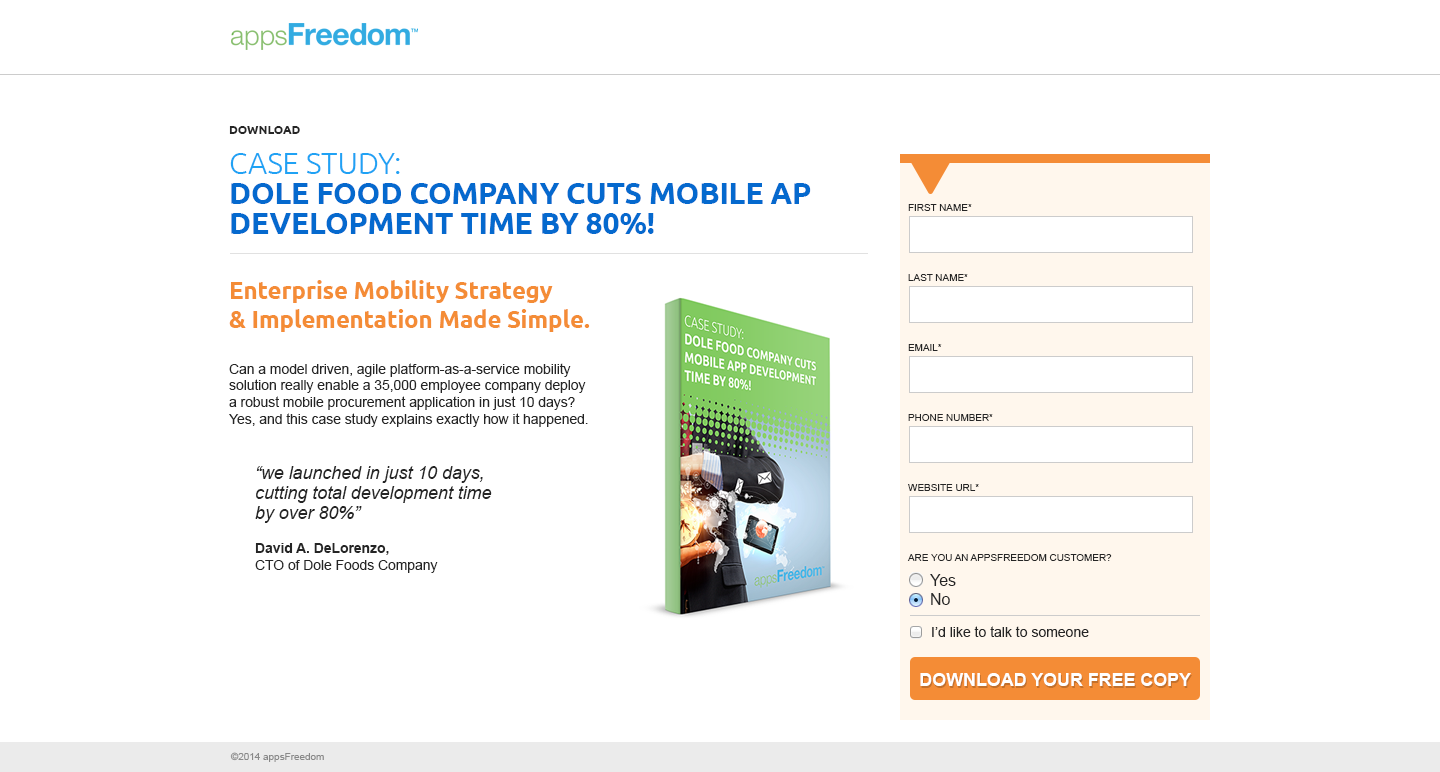
<style>
.page{position:relative;width:1440px;height:772px;background:#ffffff}
.page>*{position:absolute;margin:0}
.t1{font:14px "ArialMT";letter-spacing:-0.005em;color:#252525}
.t2{font:12px/40px "Ubuntu-Bold";letter-spacing:-0.005em;color:#252525;text-transform:uppercase}
.t3{font:30px/40px "Ubuntu-Light";letter-spacing:-0.005em;color:#1fa2f4;text-transform:uppercase}
.t4{font:30px/30px "Ubuntu-Bold";letter-spacing:-0.005em;color:#0569ce;text-transform:uppercase}
.t5{font:24px "Ubuntu-Bold";letter-spacing:-0.005em;color:#f48c36}
.t6{font:10px "ArialMT";letter-spacing:-0.005em;color:#252525;text-transform:uppercase}
.t7{font:18px/20px "Arial-ItalicMT";letter-spacing:-0.005em;color:#252525}
.t8{font:14px/34px "Arial-BoldMT";letter-spacing:-0.005em;color:#252525}
.t9{font:16px "ArialMT";color:#252525}
.t10{font:14px "ArialMT";color:#252525}
.t11{font:18px "Arial-BoldMT";letter-spacing:-0.005em;color:#ffffff;text-transform:uppercase}
.t12{font:10px "ArialMT";letter-spacing:-0.005em;color:#898989}
</style>
<div class="page">
<p class="t1" style="left:229px;top:126px;width:582px;height:301px"><span class="t2">Download <br></span><span class="t3">Case study:<br></span><span class="t4">Dole Food Company Cuts Mobile Ap Development Time by 80%!<br><br></span><span class="t5">Enterprise Mobility Strategy <br>&amp; Implementation Made Simple.<br><br></span>Can a model driven, agile platform-as-a-service mobility <br>solution really enable a 35,000 employee company deploy <br>a robust mobile procurement application in just 10 days?  <br>Yes, and this case study explains exactly how it happened.</p>
<p class="t6" style="left:908px;top:204px;width:64px;height:7px">First name*</p>
<p class="t6" style="left:908px;top:274px;width:60px;height:7px">Last name*</p>
<p class="t6" style="left:908px;top:344px;width:34px;height:7px">email*</p>
<p class="t6" style="left:908px;top:414px;width:85px;height:7px">phone number*</p>
<p class="t7" style="left:255px;top:466px;width:237px;height:107px">“we launched in just 10 days, <br>cutting total development time <br>by over 80%”  <br><span class="t8">David A. DeLorenzo, <br></span><span class="t1">CTO of Dole Foods Company</span></p>
<p class="t6" style="left:908px;top:484px;width:71px;height:7px">website url*</p>
<p class="t6" style="left:907px;top:554px;width:205px;height:7px">Are you an appsfreedom customer?</p>
<p class="t9" style="left:930px;top:574px;width:26px;height:31px">Yes<br>No</p>
<p class="t10" style="left:932px;top:626px;width:157px;height:11px">I’d like to talk to someone</p>
<p class="t11" style="left:920px;top:673px;width:271px;height:13px">Download Your Free Copy</p>
<p class="t12" style="left:230px;top:752px;width:94px;height:10px">©2014 appsFreedom</p>
</div>
